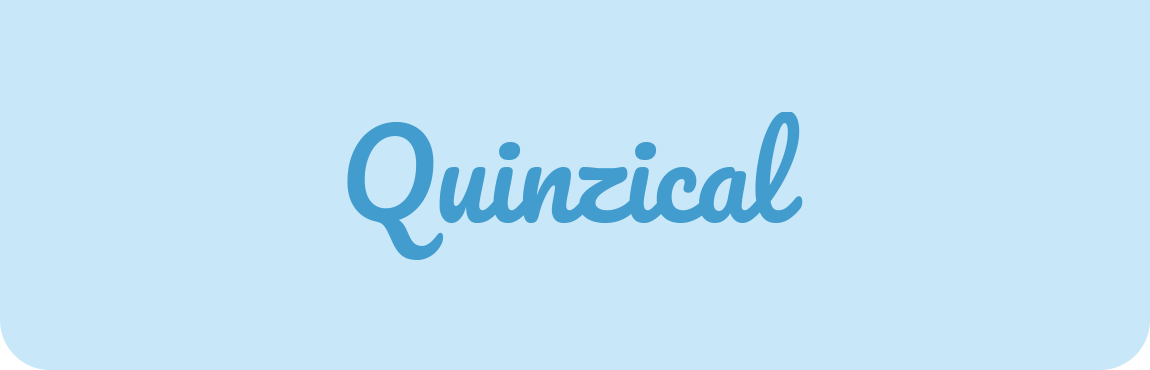
<style>
.page{position:relative;width:1150px;height:370px;background:#c8e7f8}
.page>*{position:absolute;margin:0}
.t1{font:116.7px "Pacifico-Regular";color:#429ccd}
</style>
<div class="page">
<p class="t1" style="left:347px;top:112px;width:456px;height:148px">Quinzical</p>
</div>
